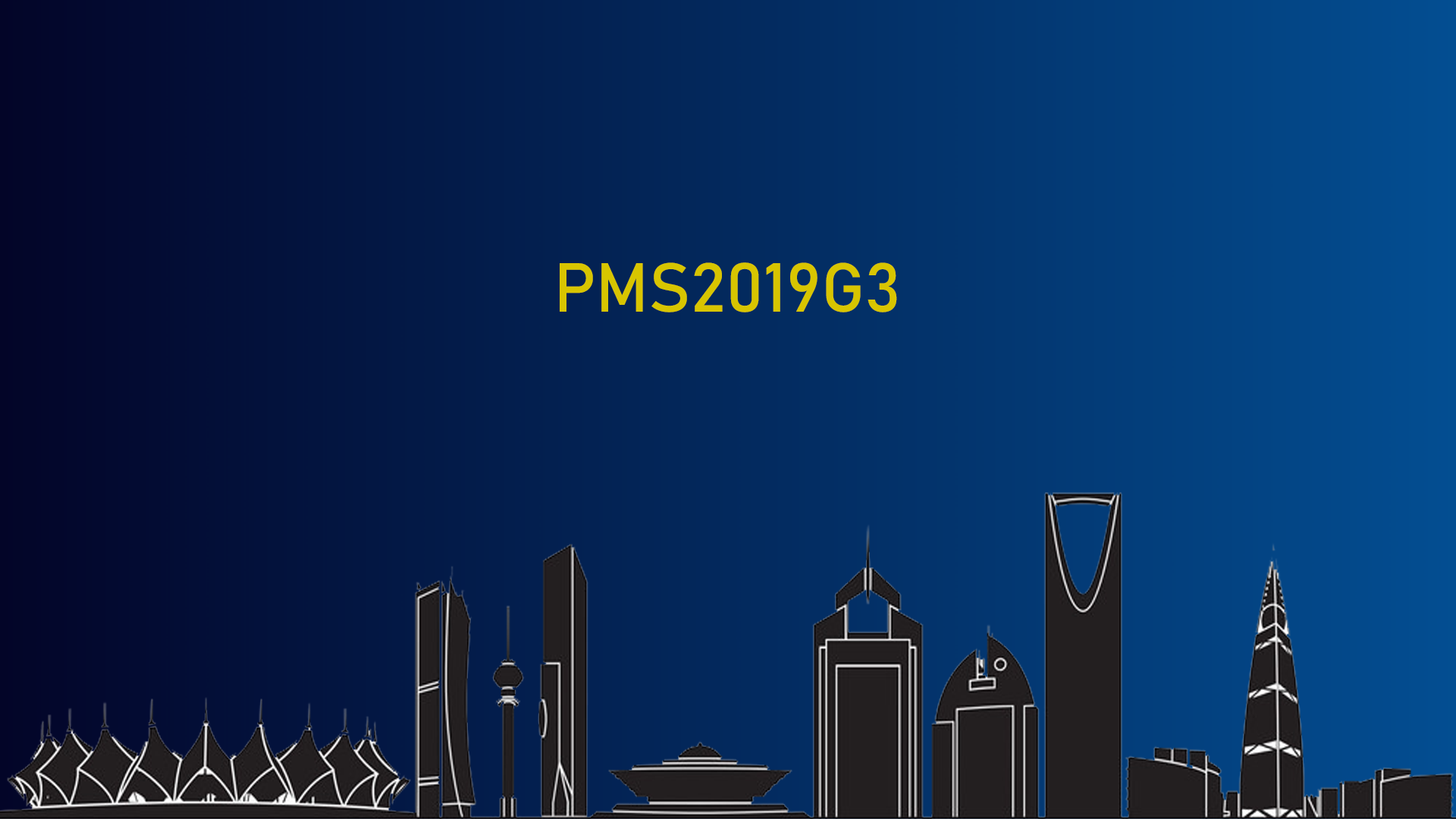
<style>
.page{position:relative;width:1456px;height:819px}
.page>*{position:absolute;margin:0}
.t1{font:68.2px "Bahnschrift";color:#d8c500}
</style>
<div class="page">
<p class="t1" style="left:560px;top:262px;width:337px;height:50px">PMS2019G3</p>
</div>
